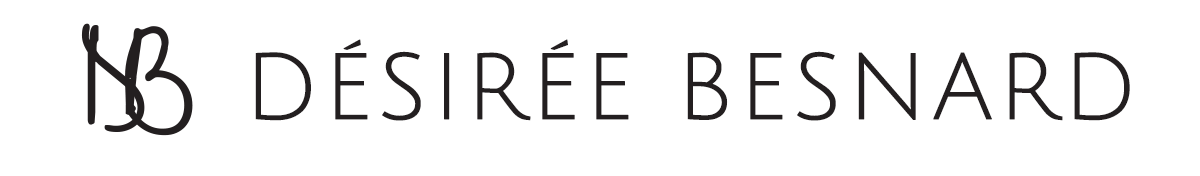
<style>
.page{position:relative;width:1200px;height:176px;background:#ffffff}
.page>*{position:absolute;margin:0}
.t1{font:91.7px "JuliusSansOne-Regular";letter-spacing:0.025em;color:#231f20;font-weight:bold}
</style>
<div class="page">
<p class="t1" style="left:255px;top:39px;width:875px;height:82px">DÉSIRÉE BESNARD</p>
</div>
